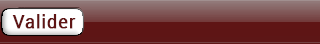
<style>
.page{position:relative;width:320px;height:44px}
.page>*{position:absolute;margin:0}
.t1{font:18px "Roboto-Regular";letter-spacing:0.025em;color:#5f1515;font-weight:bold}
</style>
<div class="page">
<p class="t1" style="left:12px;top:14px;width:64px;height:15px">Valider</p>
</div>
